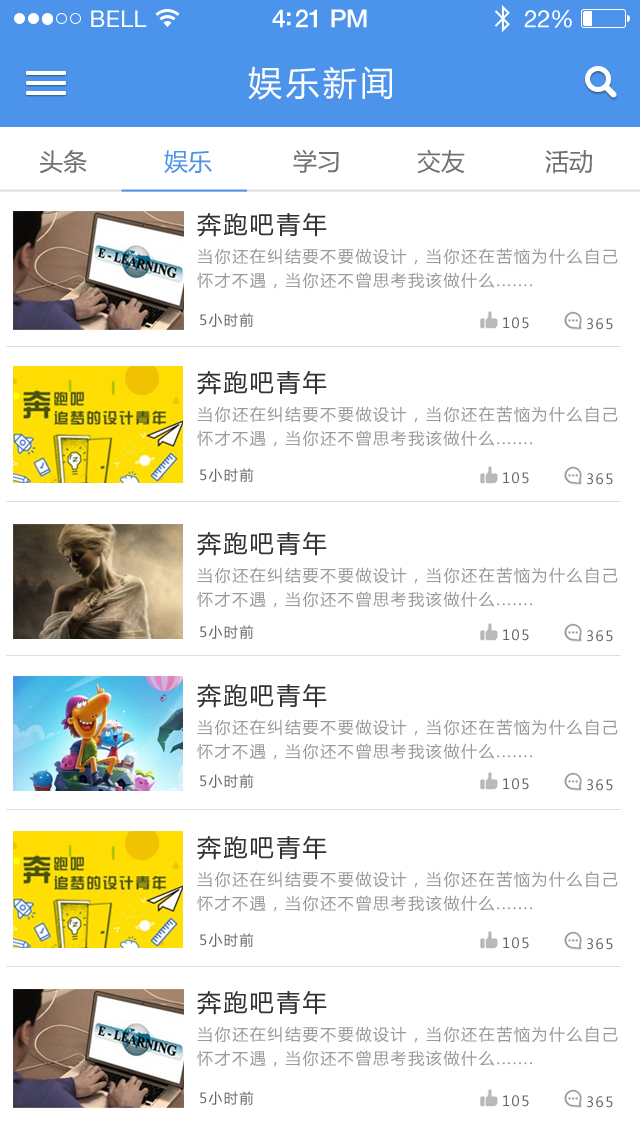
<style>
.page{position:relative;width:640px;height:1136px;background:#ffffff}
.page>*{position:absolute;margin:0}
.t1{font:23px "HelveticaNeue";letter-spacing:0.02em;color:#ffffff}
.t2{font:25px "HelveticaNeue-Medium";letter-spacing:-0.02em;color:#ffffff}
.t3{font:24px "HelveticaNeue";letter-spacing:-0.02em;color:#ffffff}
.t4{font:34px "MicrosoftYaHei";letter-spacing:0.1em;color:#ffffff}
.t5{font:24px "MicrosoftYaHei";color:#727272}
.t6{font:24px "MicrosoftYaHei";color:#4c93eb}
.t7{font:24px "MicrosoftYaHei";letter-spacing:0.1em;color:#333333}
.t8{font:16px/24px "MicrosoftYaHei";letter-spacing:0.1em;color:#9a9a9a}
.t9{font:14px "MicrosoftYaHei";letter-spacing:0.1em;color:#666666}
</style>
<div class="page">
<p class="t1" style="left:91px;top:10px;width:56px;height:17px">BELL</p>
<p class="t2" style="left:272px;top:9px;width:95px;height:19px">4:21 PM</p>
<p class="t3" style="left:524px;top:10px;width:48px;height:18px">22%</p>
<p class="t4" style="left:248px;top:66px;width:144px;height:34px">娱乐新闻</p>
<p class="t5" style="left:39px;top:150px;width:48px;height:24px">头条</p>
<p class="t6" style="left:164px;top:150px;width:48px;height:24px">娱乐</p>
<p class="t5" style="left:293px;top:149px;width:46px;height:24px">学习</p>
<p class="t5" style="left:417px;top:149px;width:48px;height:25px">交友</p>
<p class="t5" style="left:545px;top:150px;width:47px;height:24px">活动</p>
<p class="t7" style="left:197px;top:213px;width:130px;height:24px">奔跑吧青年</p>
<p class="t8" style="left:197px;top:248px;width:421px;height:41px">当你还在纠结要不要做设计，当你还在苦恼为什么自己<br>怀才不遇，当你还不曾思考我该做什么.......</p>
<p class="t7" style="left:197px;top:371px;width:130px;height:24px">奔跑吧青年</p>
<p class="t8" style="left:197px;top:406px;width:421px;height:41px">当你还在纠结要不要做设计，当你还在苦恼为什么自己<br>怀才不遇，当你还不曾思考我该做什么.......</p>
<p class="t7" style="left:197px;top:532px;width:130px;height:24px">奔跑吧青年</p>
<p class="t8" style="left:197px;top:567px;width:421px;height:41px">当你还在纠结要不要做设计，当你还在苦恼为什么自己<br>怀才不遇，当你还不曾思考我该做什么.......</p>
<p class="t9" style="left:200px;top:625px;width:54px;height:14px">5小时前</p>
<p class="t9" style="left:503px;top:629px;width:26px;height:12px">105</p>
<p class="t9" style="left:587px;top:630px;width:26px;height:12px">365</p>
<p class="t7" style="left:197px;top:684px;width:130px;height:24px">奔跑吧青年</p>
<p class="t8" style="left:197px;top:719px;width:421px;height:41px">当你还在纠结要不要做设计，当你还在苦恼为什么自己<br>怀才不遇，当你还不曾思考我该做什么.......</p>
<p class="t7" style="left:197px;top:836px;width:130px;height:24px">奔跑吧青年</p>
<p class="t8" style="left:197px;top:871px;width:421px;height:41px">当你还在纠结要不要做设计，当你还在苦恼为什么自己<br>怀才不遇，当你还不曾思考我该做什么.......</p>
<p class="t7" style="left:197px;top:991px;width:130px;height:24px">奔跑吧青年</p>
<p class="t8" style="left:197px;top:1026px;width:421px;height:41px">当你还在纠结要不要做设计，当你还在苦恼为什么自己<br>怀才不遇，当你还不曾思考我该做什么.......</p>
</div>
